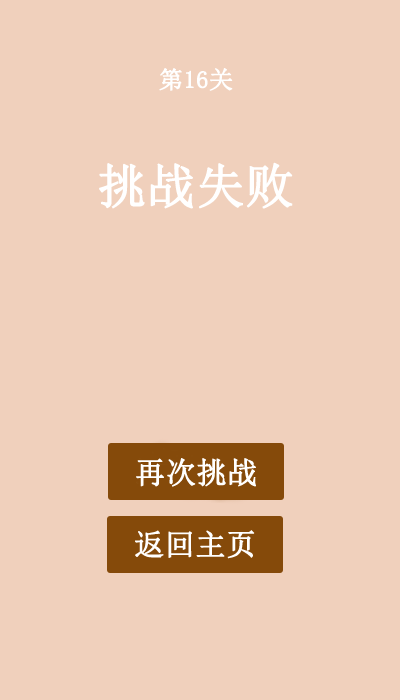
<style>
.page{position:relative;width:400px;height:700px;background:#f0d0bc}
.page>*{position:absolute;margin:0}
.t1{font:24px "SimSun";color:#ffffff;font-weight:bold}
.t2{font:48px "SimSun";color:#ffffff;font-weight:bold}
.t3{font:30px "SimSun";color:#ffffff;font-weight:bold}
</style>
<div class="page">
<p class="t1" style="left:159px;top:68px;width:74px;height:23px">第16关</p>
<p class="t2" style="left:99px;top:162px;width:194px;height:47px">挑战失败</p>
<p class="t3" style="left:136px;top:458px;width:120px;height:29px">再次挑战</p>
</div>
